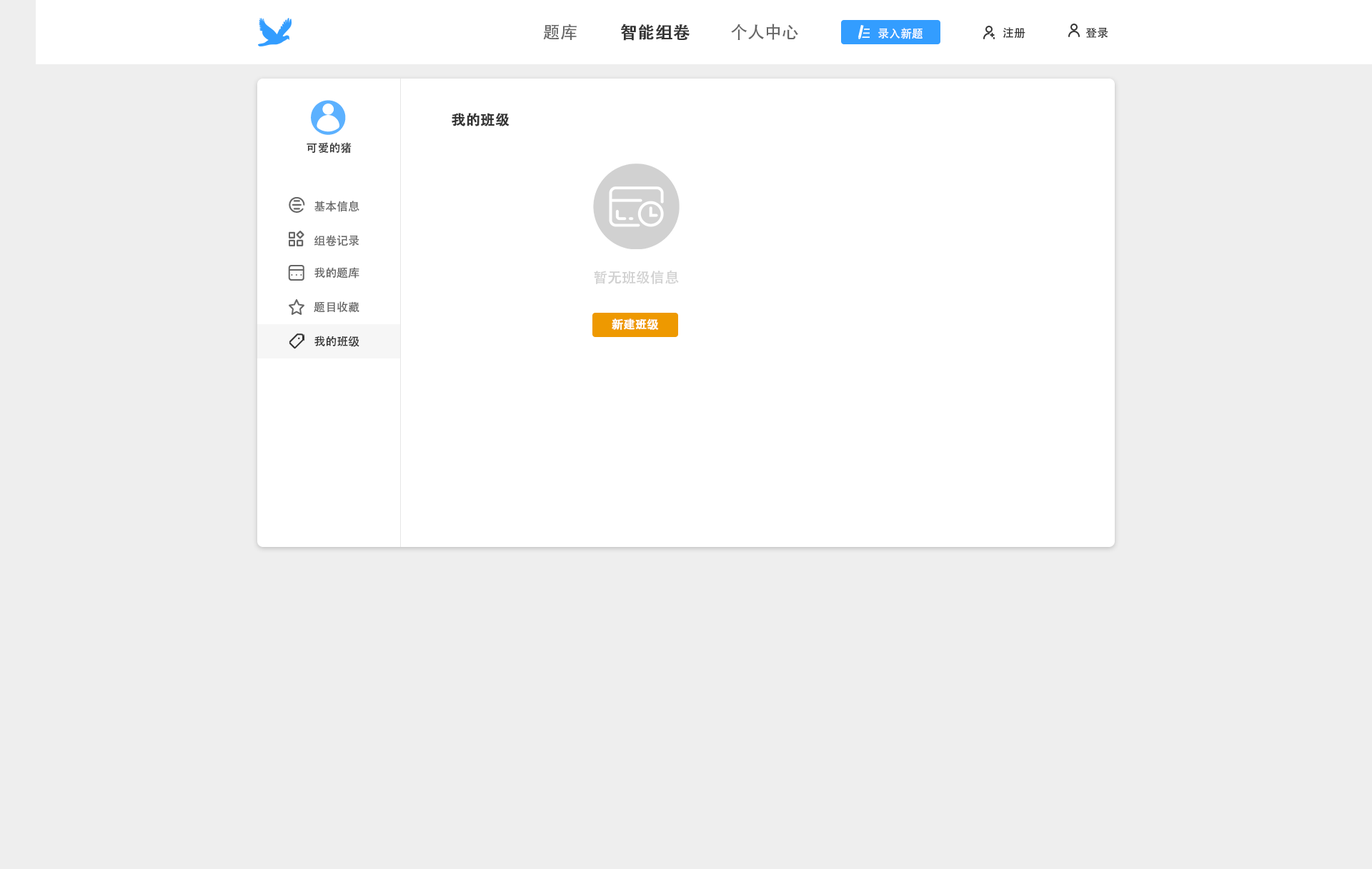
<style>
.page{position:relative;width:1372px;height:869px;background:#eeeeee}
.page>*{position:absolute;margin:0}
.t1{font:17.1px "AdobeHeitiStd-Regular";color:#666666}
.t2{font:17.1px "AdobeHeitiStd-Regular";color:#333333;font-weight:bold}
.t3{font:11.4px "AdobeHeitiStd-Regular";color:#ffffff}
.t4{font:11.4px "AdobeHeitiStd-Regular";color:#333333}
.t5{font:14.3px "AdobeHeitiStd-Regular";color:#333333;font-weight:bold}
.t6{font:11.4px "AdobeHeitiStd-Regular";color:#666666}
.t7{font:14.3px "AdobeHeitiStd-Regular";color:#d1d1d1}
.t8{font:11.4px "AdobeHeitiStd-Regular";color:#ffffff;font-weight:bold}
</style>
<div class="page">
<p class="t1" style="left:543px;top:24px;width:33px;height:16px">题库</p>
<p class="t2" style="left:621px;top:24px;width:68px;height:17px">智能组卷</p>
<p class="t1" style="left:731px;top:24px;width:67px;height:16px">个人中心</p>
<p class="t3" style="left:878px;top:28px;width:44px;height:11px">录入新题</p>
<p class="t4" style="left:1002px;top:27px;width:23px;height:12px">注册</p>
<p class="t4" style="left:1085px;top:27px;width:23px;height:12px">登录</p>
<p class="t5" style="left:451px;top:113px;width:58px;height:13px">我的班级</p>
<p class="t4" style="left:306px;top:142px;width:45px;height:12px">可爱的猪</p>
<p class="t6" style="left:314px;top:201px;width:45px;height:11px">基本信息</p>
<p class="t6" style="left:314px;top:235px;width:45px;height:11px">组卷记录</p>
<p class="t6" style="left:314px;top:267px;width:45px;height:12px">我的题库</p>
<p class="t7" style="left:594px;top:270px;width:85px;height:14px">暂无班级信息</p>
<p class="t6" style="left:314px;top:301px;width:45px;height:12px">题目收藏</p>
<p class="t8" style="left:611px;top:319px;width:48px;height:11px">新建班级</p>
<p class="t4" style="left:314px;top:336px;width:45px;height:11px">我的班级</p>
</div>
